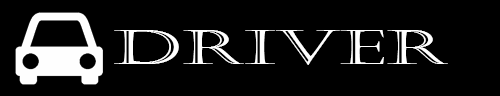
<style>
.page{position:relative;width:500px;height:96px;background:#000000}
.page>*{position:absolute;margin:0}
.t1{font:48.4px "Castellar";color:#ffffff;scale:1.66 1}
</style>
<div class="page">
<p class="t1" style="left:114px;top:30px;width:334px;height:35px">Driver</p>
</div>
